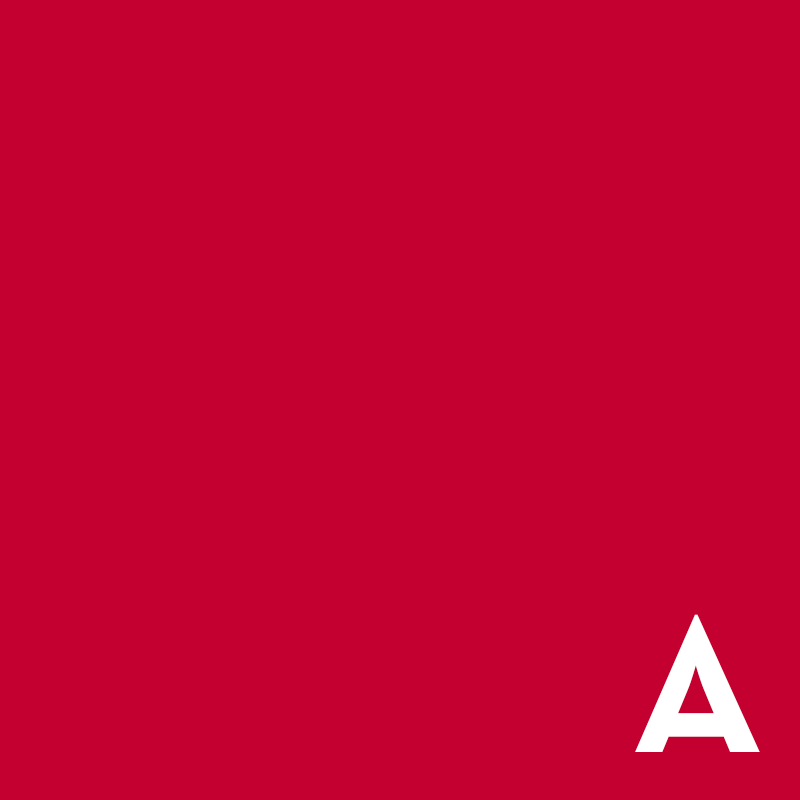
<style>
.page{position:relative;width:800px;height:800px;background:#c3002f}
.page>*{position:absolute;margin:0}
.t1{font:200px "NeutraText-Bold";letter-spacing:0.025em;color:#ffffff}
</style>
<div class="page">
<p class="t1" style="left:635px;top:614px;width:125px;height:138px">A</p>
</div>
